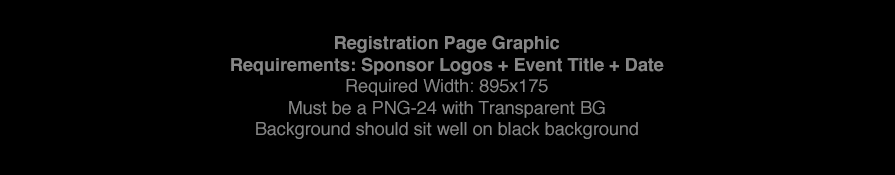
<style>
.page{position:relative;width:895px;height:175px;background:#000000}
.page>*{position:absolute;margin:0}
.t1{font:18px "Helvetica";color:#858585}
.t2{font:18px "Helvetica-Bold";color:#858585}
</style>
<div class="page">
<p class="t1" style="left:231px;top:35px;width:433px;height:104px;text-align:center"><span class="t2">Registration Page Graphic<br>Requirements: Sponsor Logos + Event Title + Date<br></span>Required Width: 895x175<br>Must be a PNG-24 with Transparent BG<br>Background should sit well on black background</p>
</div>
